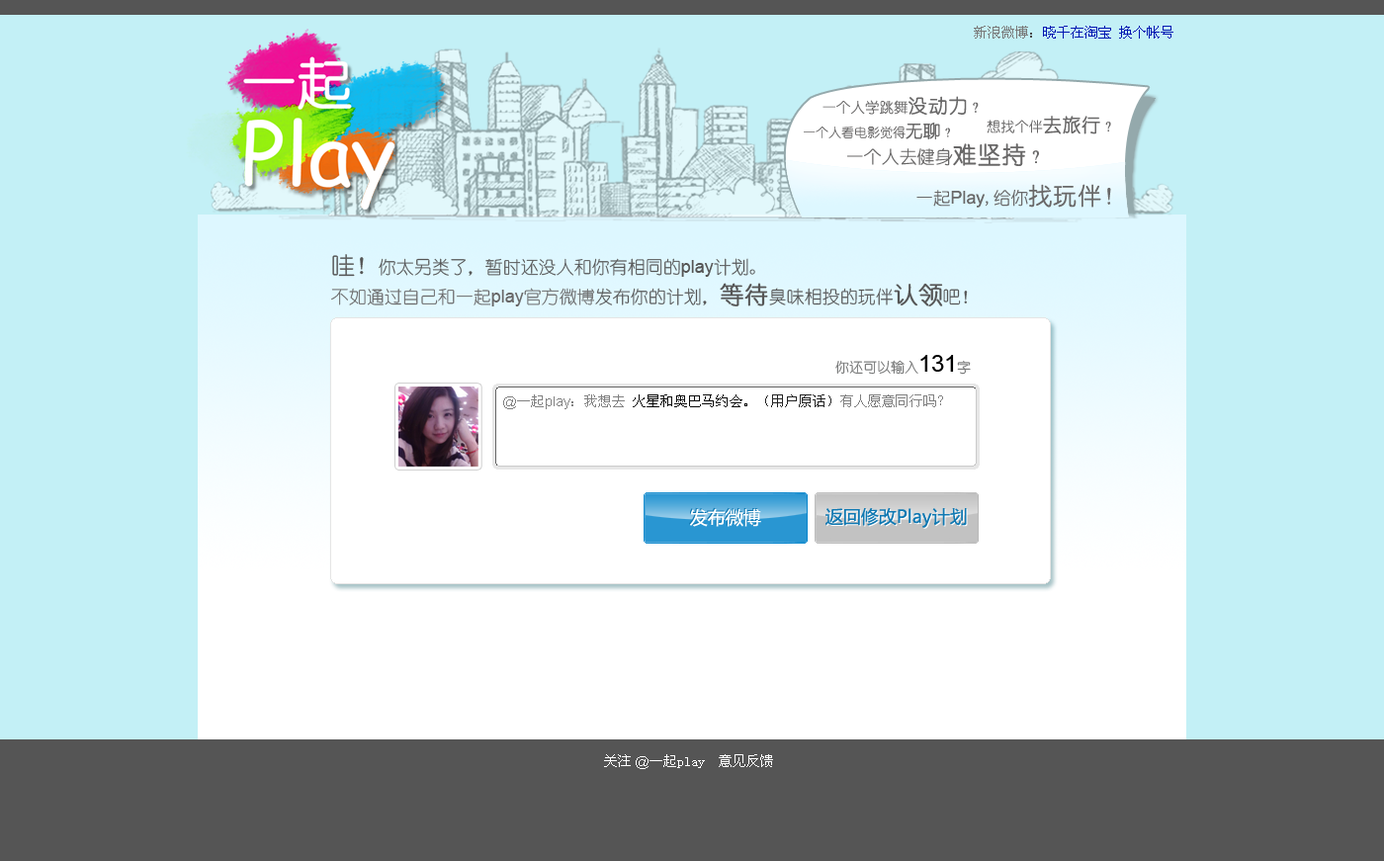
<style>
.page{position:relative;width:1384px;height:861px;background:#c3f0f6}
.page>*{position:absolute;margin:0}
.t1{font:13.8px "SimSun";color:#0015b1}
.t2{font:13.8px "SimSun";color:#797979}
.t3{font:13.8px "SimSun";color:#484848}
.t4{font:14.4px "YouYuan";color:#696868}
.t5{font:19.2px "YouYuan";color:#696868;font-weight:bold}
.t6{font:12.8px "YouYuan";color:#696868}
.t7{font:17.1px "YouYuan";color:#696868;font-weight:bold}
.t8{font:14px "YouYuan";color:#696868}
.t9{font:18.7px "YouYuan";color:#696868;font-weight:bold}
.t10{font:17.8px "YouYuan";color:#696868}
.t11{font:23.7px "YouYuan";color:#696868;font-weight:bold}
.t12{font:17.8px "ArialMT";color:#696868}
.t13{font:23.7px "YouYuan";color:#696868}
.t14{font:17.8px/14.8px "YouYuan";color:#555555}
.t15{font:23.7px/14.8px "YouYuan";color:#555555}
.t16{font:17.8px/14.8px "ArialMT";color:#555555}
.t17{font:17.8px/14.8px "YouYuan";color:#696868}
.t18{font:17.8px/14.8px "ArialMT";color:#696868}
.t19{font:23.7px/14.8px "YouYuan";color:#555555;font-weight:bold}
.t20{font:13.8px "YouYuan";color:#717272}
.t21{font:23.7px "ArialMT";color:#000000}
.t22{font:13.8px "SimSun";color:#080808}
.t23{font:13.8px "ArialMT";color:#808080}
.t24{font:13.8px "SimSun";color:#808080}
.t25{font:13.8px "SimSun";color:#232323}
.t26{font:17.8px "MicrosoftYaHei";color:#ffffff}
.t27{font:17.8px "MicrosoftYaHei";color:#0f78b2}
.t28{font:17.8px "MicrosoftYaHei"}
.t29{font:13.8px "SimSun";color:#ffffff}
.t30{font:13.8px "ArialMT";color:#ffffff}
</style>
<div class="page">
<p class="t1" style="left:974px;top:26px;width:200px;height:13px"><span class="t2">新浪微博</span><span class="t3">：</span>晓千在淘宝 换个帐号</p>
<p class="t4" style="left:823px;top:96px;width:156px;height:20px">一个人学跳舞<span class="t5">没动力</span>？</p>
<p class="t6" style="left:804px;top:123px;width:146px;height:16px">一个人看电影觉得<span class="t7">无聊</span>？</p>
<p class="t8" style="left:987px;top:116px;width:125px;height:18px">想找个伴<span class="t9">去旅行</span>？</p>
<p class="t10" style="left:847px;top:143px;width:192px;height:23px">一个人去健身<span class="t11">难坚持</span>？</p>
<p class="t12" style="left:917px;top:184px;width:195px;height:24px"><span class="t10">一起</span>Play<span class="t10">,给你</span><span class="t11">找玩伴</span><span class="t13">！</span></p>
<p class="t14" style="left:331px;top:254px;width:637px;height:53px"><span class="t15">哇！</span>你太另类了，暂时还没人和你有相同的<span class="t16">play</span>计划。<br> <br><span class="t17">不如通过自己和一起</span><span class="t18">play</span><span class="t17">官方微博</span>发布你的计划，<span class="t19">等待</span>臭味相投的玩伴<span class="t19">认领</span>吧！</p>
<p class="t20" style="left:836px;top:355px;width:135px;height:20px">你还可以输入<span class="t21">131</span>字</p>
<p class="t22" style="left:503px;top:395px;width:440px;height:14px"><span class="t23">@</span><span class="t24">一起</span><span class="t23">play</span><span class="t24">：我想去 </span>火星和奥巴马约会。<span class="t25">（用户原话）</span><span class="t24">有人愿意同行吗？</span></p>
<p class="t26" style="left:690px;top:508px;width:71px;height:19px">发布微博</p>
<p class="t27" style="left:826px;top:507px;width:141px;height:21px">返回修改Play计划</p>
<p class="t28" style="left:827px;top:508px;width:141px;height:21px">返回修改Play计划</p>
<p class="t29" style="left:604px;top:755px;width:169px;height:14px">关注<span class="t30"> @</span>一起play  意见反馈</p>
</div>
